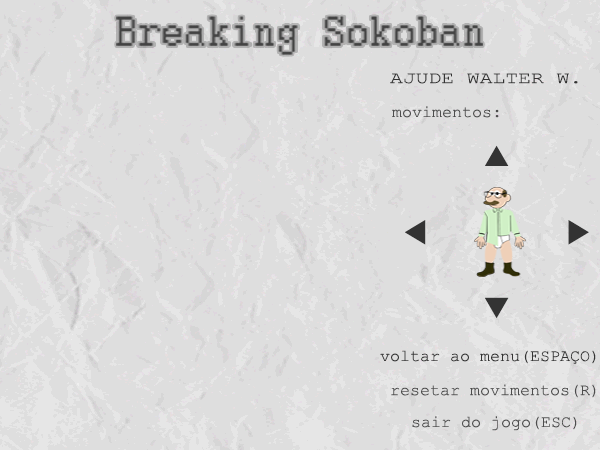
<style>
.page{position:relative;width:600px;height:450px;background:#dedede}
.page>*{position:absolute;margin:0}
.t1{font:16.7px "CourierNewPSMT";color:#333333;scale:1.28 1}
.t2{font:16.7px "CourierNewPSMT";color:#4d4d4d}
.t3{font:16.7px "CourierNewPSMT";color:#333333}
</style>
<div class="page">
<p class="t1" style="left:390px;top:73px;width:188px;height:11px">AJUDE WALTER W.</p>
<p class="t2" style="left:392px;top:106px;width:107px;height:12px">movimentos:</p>
<p class="t3" style="left:380px;top:350px;width:216px;height:14px">voltar ao menu(ESPAÇO)</p>
<p class="t2" style="left:391px;top:384px;width:205px;height:14px">resetar movimentos(R)</p>
<p class="t2" style="left:412px;top:416px;width:165px;height:15px">sair do jogo(ESC)</p>
</div>
